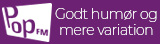
<style>
.page{position:relative;width:160px;height:44px;background:#6d2173}
.page>*{position:absolute;margin:0}
.t1{font:14px "Montserrat-ExtraLight";letter-spacing:-0.025em;color:#ffffff}
</style>
<div class="page">
<p class="t1" style="left:55px;top:8px;width:102px;height:27px;text-align:center">Godt humør og<br>mere variation</p>
</div>
